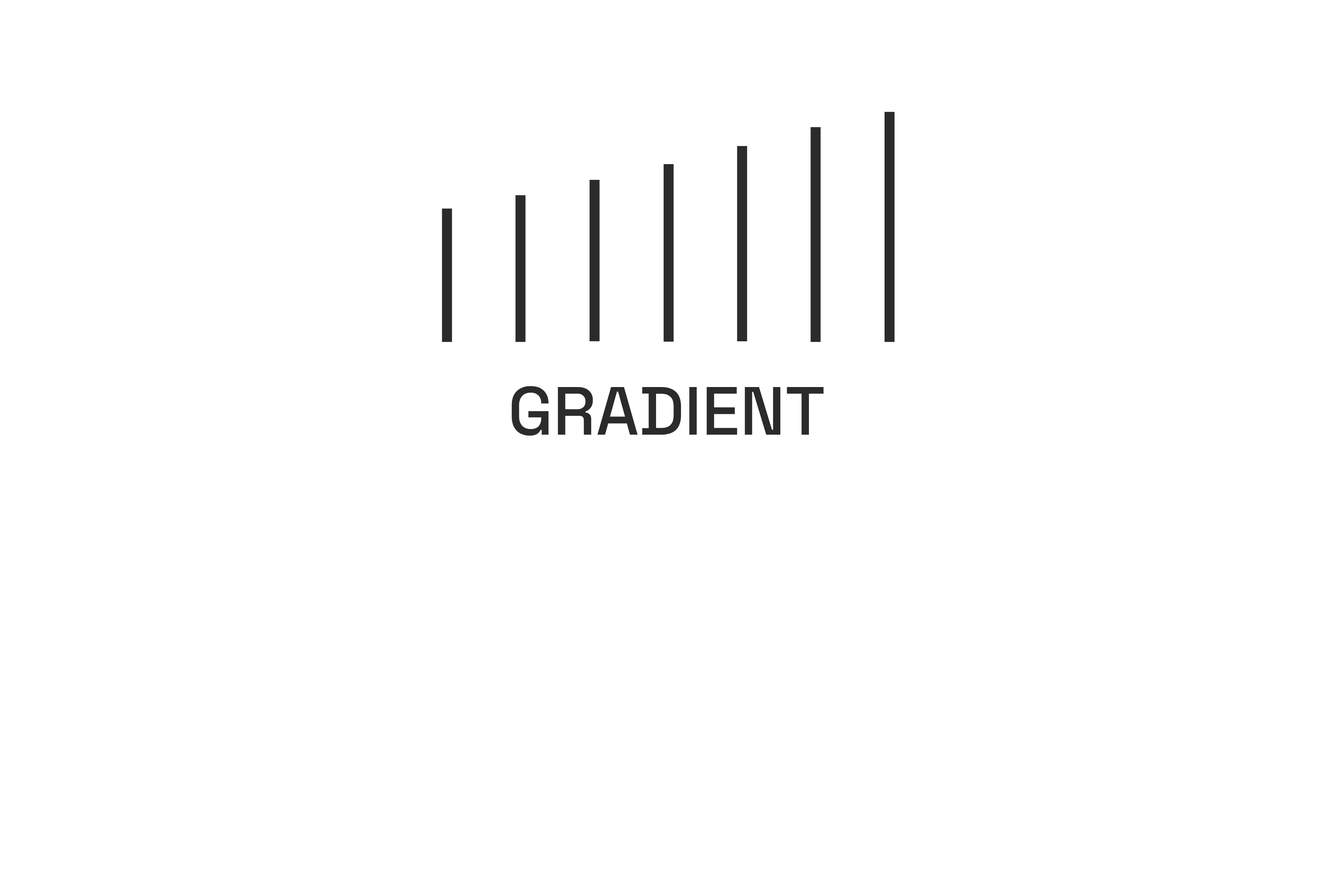
<style>
.page{position:relative;width:1337px;height:892px;background:#ffffff}
.page>*{position:absolute;margin:0}
.t1{font:68.1px "SpaceGroteskLight-Medium";color:#2b2b2b}
</style>
<div class="page">
<p class="t1" style="left:512px;top:386px;width:312px;height:50px">GRADIENT</p>
</div>
